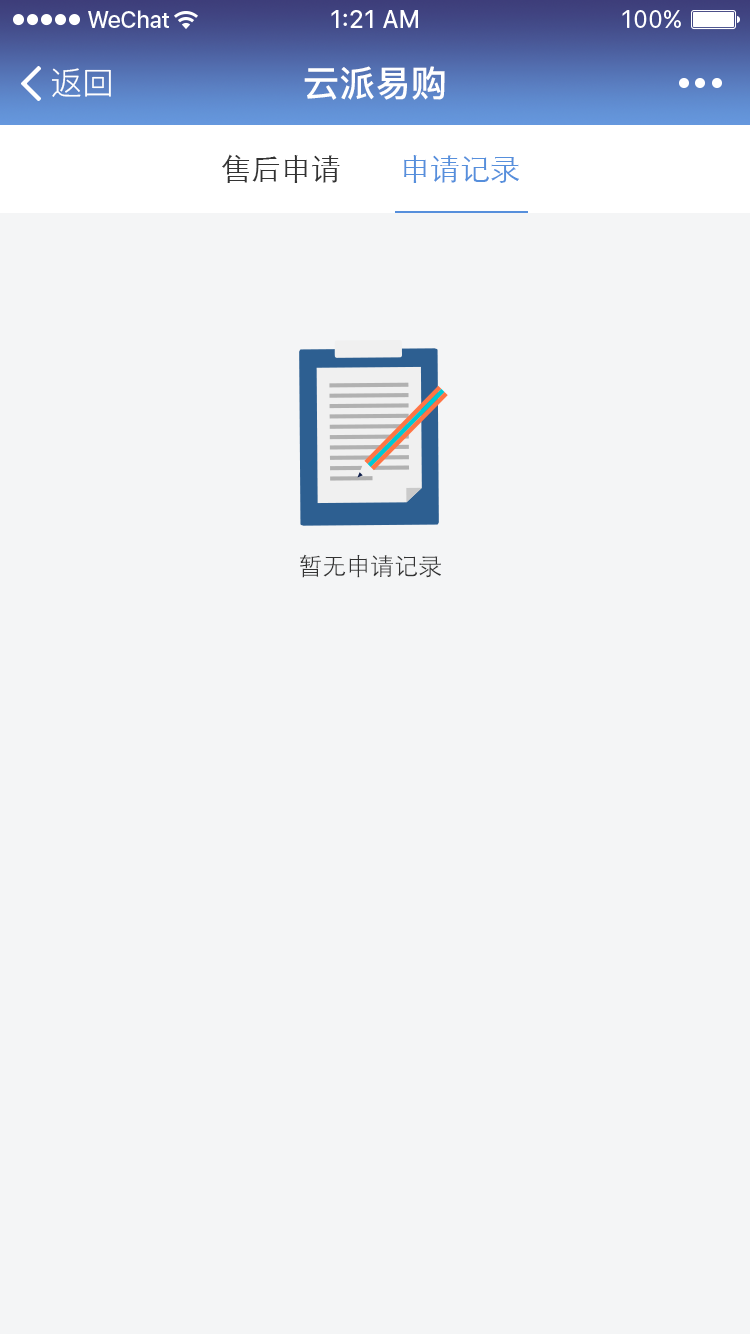
<style>
.page{position:relative;width:750px;height:1334px;background:#f4f5f6}
.page>*{position:absolute;margin:0}
.t1{font:32px "PingFang-SC-Regular";color:#ffffff}
.t2{font:36px "PingFang-SC-Bold";color:#ffffff}
.t3{font:30px "STXihei";color:#333333}
.t4{font:30px "STXihei";color:#568fdc}
.t5{font:24px "STXihei";color:#333333}
</style>
<div class="page">
<p class="t1" style="left:52px;top:68px;width:59px;height:29px">返回</p>
<p class="t2" style="left:304px;top:66px;width:141px;height:34px">云派易购</p>
<p class="t3" style="left:222px;top:154px;width:118px;height:29px">售后申请</p>
<p class="t4" style="left:404px;top:155px;width:115px;height:28px">申请记录</p>
<p class="t5" style="left:300px;top:554px;width:141px;height:24px">暂无申请记录</p>
</div>
